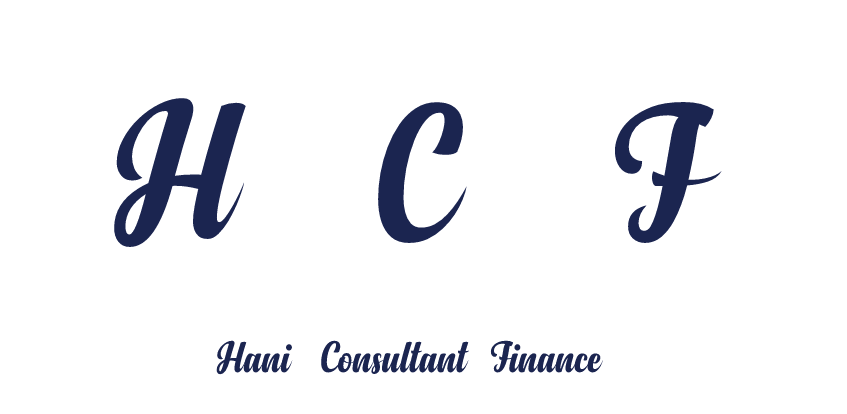
<style>
.page{position:relative;width:847px;height:414px;background:#ffffff}
.page>*{position:absolute;margin:0}
.t1{font:200px "Anydore";color:#1b2550}
.t2{font:200px "Anydore";color:#1b2550;text-transform:uppercase}
.t3{font:45px "Anydore";color:#1b2550}
</style>
<div class="page">
<p class="t1" style="left:114px;top:98px;width:132px;height:149px">H</p>
<p class="t2" style="left:378px;top:102px;width:89px;height:141px">C</p>
<p class="t1" style="left:614px;top:102px;width:108px;height:141px">F</p>
<p class="t3" style="left:216px;top:340px;width:77px;height:35px">Hani</p>
<p class="t3" style="left:321px;top:340px;width:149px;height:35px">Consultant</p>
<p class="t3" style="left:490px;top:340px;width:113px;height:33px">Finance</p>
</div>
